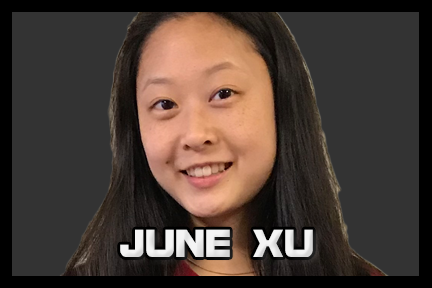
<style>
.page{position:relative;width:432px;height:288px;background:#333333}
.page>*{position:absolute;margin:0}
.t1{font:41.7px "BolsterBold";color:#f3f3f3}
</style>
<div class="page">
<p class="t1" style="left:120px;top:229px;width:193px;height:28px">JUNE XU</p>
</div>
